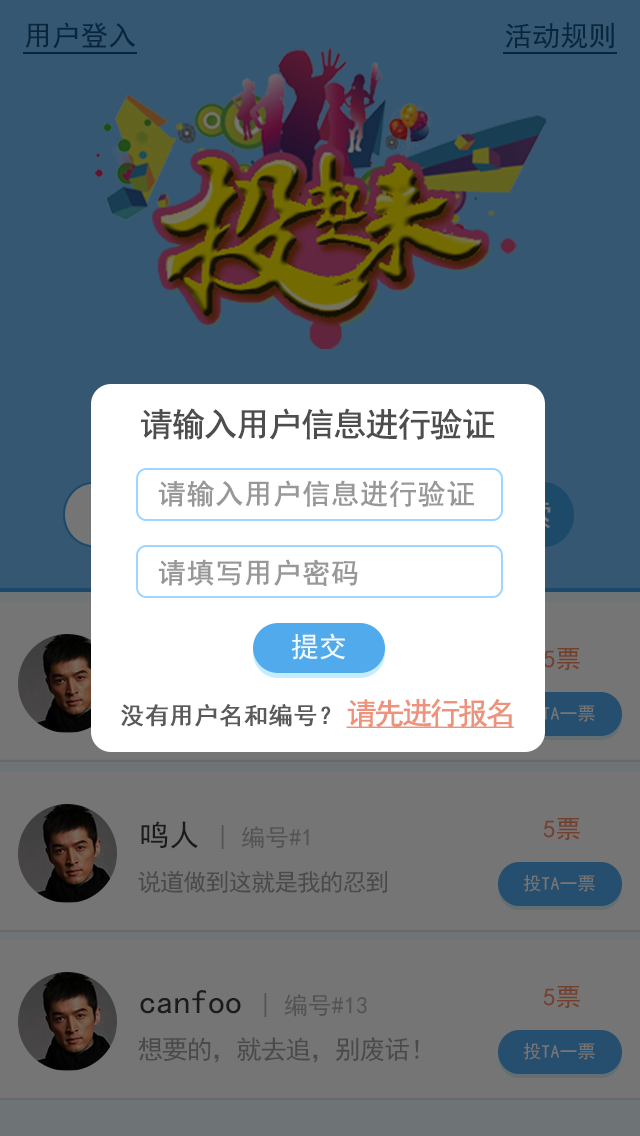
<style>
.page{position:relative;width:640px;height:1136px;background:#355771}
.page>*{position:absolute;margin:0}
.t1{font:28px "SimHei";letter-spacing:0.005em;color:#07263e}
.t2{font:33px "SimHei";letter-spacing:-0.05em;color:#4d4d4d;font-weight:bold}
.t3{font:28px "SimHei";letter-spacing:0.005em;color:#999898;font-weight:bold}
.t4{font:28px "SimHei";letter-spacing:0.005em;color:#effbff}
.t5{font:25px "SimHei";letter-spacing:0.005em;color:#753f2d}
.t6{font:30px "SimHei";letter-spacing:-0.1em;color:#ed937c;font-weight:bold;text-decoration:underline}
.t7{font:24px "SimHei";letter-spacing:0.005em;color:#5a5a5a;font-weight:bold}
.t8{font:24px "SimHei";letter-spacing:0.005em}
.t9{font:30px "SimHei";letter-spacing:0.005em}
.t10{font:24px "SimHei";letter-spacing:-0.05em;color:#4a4a4a}
.t11{font:18px "SimHei";letter-spacing:0.005em;color:#757575}
.t12{font:34px "SimHei";letter-spacing:0.005em}
.t13{font:26px "SimHei";letter-spacing:-0.05em;color:#4a4a4a}
</style>
<div class="page">
<p class="t1" style="left:25px;top:22px;width:111px;height:27px">用户登入</p>
<p class="t1" style="left:505px;top:22px;width:109px;height:27px">活动规则</p>
<p class="t2" style="left:141px;top:408px;width:354px;height:32px">请输入用户信息进行验证</p>
<p class="t3" style="left:158px;top:480px;width:316px;height:27px">请输入用户信息进行验证</p>
<p class="t3" style="left:158px;top:559px;width:200px;height:27px">请填写用户密码</p>
<p class="t4" style="left:291px;top:633px;width:54px;height:27px">提交</p>
<p class="t5" style="left:543px;top:647px;width:37px;height:24px">5票</p>
<p class="t6" style="left:346px;top:698px;width:168px;height:30px">请先进行报名</p>
<p class="t7" style="left:121px;top:704px;width:210px;height:23px">没有用户名和编号？</p>
<p class="t8" style="left:141px;top:821px;width:168px;height:28px"><span class="t9">鸣人 </span>| 编号#1</p>
<p class="t5" style="left:543px;top:817px;width:37px;height:24px">5票</p>
<p class="t10" style="left:138px;top:870px;width:250px;height:23px">说道做到这就是我的忍到</p>
<p class="t11" style="left:523px;top:875px;width:72px;height:17px">投TA一票</p>
<p class="t8" style="left:140px;top:990px;width:227px;height:27px"><span class="t12">canfoo </span>| 编号#13</p>
<p class="t5" style="left:543px;top:985px;width:37px;height:24px">5票</p>
<p class="t13" style="left:138px;top:1037px;width:281px;height:26px">想要的，就去追，别废话！</p>
<p class="t11" style="left:523px;top:1043px;width:72px;height:17px">投TA一票</p>
</div>
